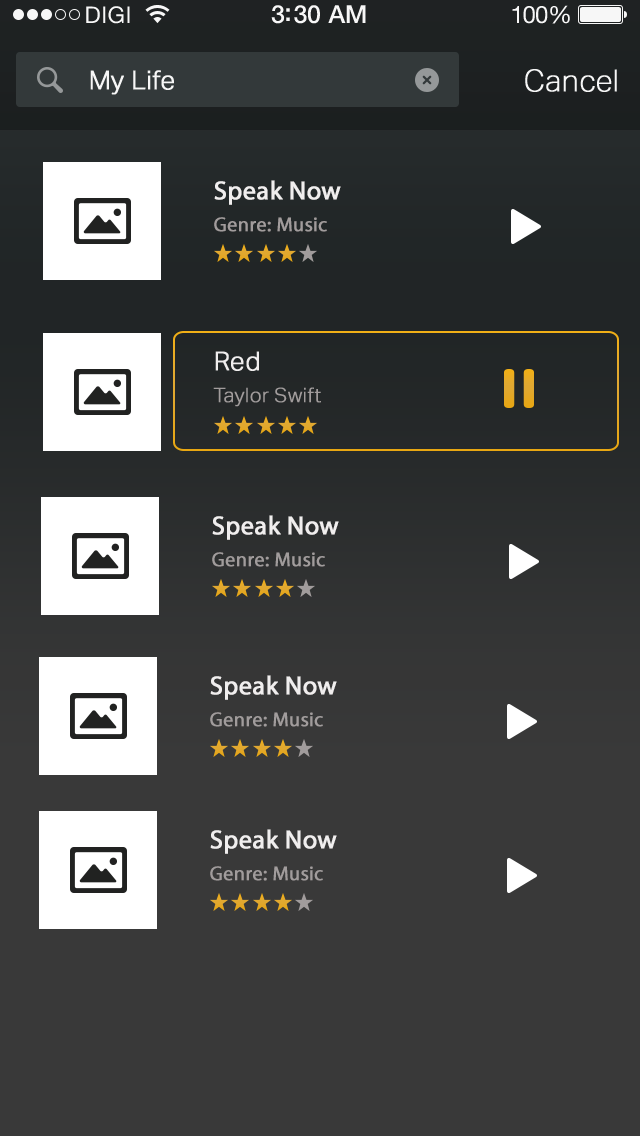
<style>
.page{position:relative;width:640px;height:1136px;background:#393939}
.page>*{position:absolute;margin:0}
.t1{font:26px "AktivGroteskTrial-Light";color:#ffffff;font-weight:bold}
.t2{font:30px "AktivGroteskTrial-Thin";color:#ffffff;font-weight:bold}
.t3{font:20px/32px "MyriadPro-Regular";color:#a19c9c;font-weight:bold}
.t4{font:26px/32px "MyriadPro-Regular";color:#f0eeee;font-weight:bold}
.t5{font:20px/32px "AktivGroteskTrial-Light";color:#a19c9c;font-weight:bold}
.t6{font:26px/32px "AktivGroteskTrial-Light";color:#f0eeee;font-weight:bold}
</style>
<div class="page">
<p class="t1" style="left:90px;top:70px;width:84px;height:25px">My Life</p>
<p class="t2" style="left:525px;top:69px;width:92px;height:23px">Cancel</p>
<p class="t3" style="left:214px;top:180px;width:127px;height:52px"><span class="t4">Speak Now<br></span>Genre: Music</p>
<p class="t5" style="left:213px;top:351px;width:108px;height:56px"><span class="t6">Red<br></span>Taylor Swift</p>
<p class="t3" style="left:212px;top:515px;width:127px;height:52px"><span class="t4">Speak Now<br></span>Genre: Music</p>
<p class="t3" style="left:210px;top:675px;width:127px;height:52px"><span class="t4">Speak Now<br></span>Genre: Music</p>
<p class="t3" style="left:210px;top:829px;width:127px;height:52px"><span class="t4">Speak Now<br></span>Genre: Music</p>
</div>
